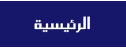
<style>
.page{position:relative;width:126px;height:48px;background:#16166b}
.page>*{position:absolute;margin:0}
.t1{font:20px "SC_KHALID";color:#ffffff;scale:1.07 1}
</style>
<div class="page">
<p class="t1" style="left:34px;top:16px;width:56px;height:17px">الرئيسية</p>
</div>
